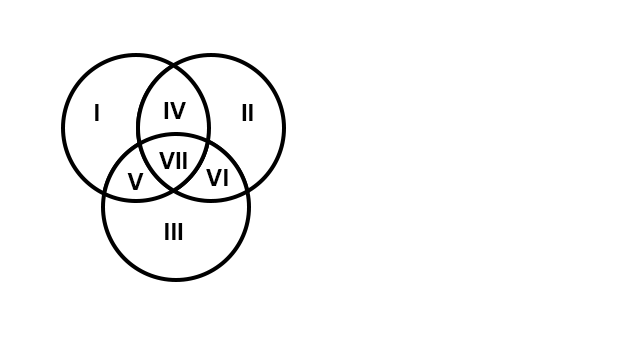
<style>
.page{position:relative;width:620px;height:350px;background:#ffffff}
.page>*{position:absolute;margin:0}
.t1{font:24px "Arial-BoldMT";color:#000000}
</style>
<div class="page">
<p class="t1" style="left:164px;top:102px;width:22px;height:17px">IV</p>
<p class="t1" style="left:95px;top:104px;width:4px;height:17px">I</p>
<p class="t1" style="left:242px;top:104px;width:11px;height:17px">II</p>
<p class="t1" style="left:159px;top:152px;width:28px;height:17px">VII</p>
<p class="t1" style="left:127px;top:173px;width:17px;height:17px">V</p>
<p class="t1" style="left:206px;top:169px;width:22px;height:17px">VI</p>
<p class="t1" style="left:165px;top:223px;width:18px;height:17px">III</p>
</div>
